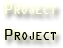
<style>
.page{position:relative;width:63px;height:48px;background:#ffffff}
.page>*{position:absolute;margin:0}
.t1{font:17px "OCRAExtended";color:#ffffff;font-variant:small-caps}
.t2{font:17px "OCRAExtended";color:#000000;font-variant:small-caps}
</style>
<div class="page">
<p class="t1" style="left:4px;top:3px;width:52px;height:11px">Project</p>
<p class="t2" style="left:5px;top:29px;width:51px;height:11px">Project</p>
</div>
